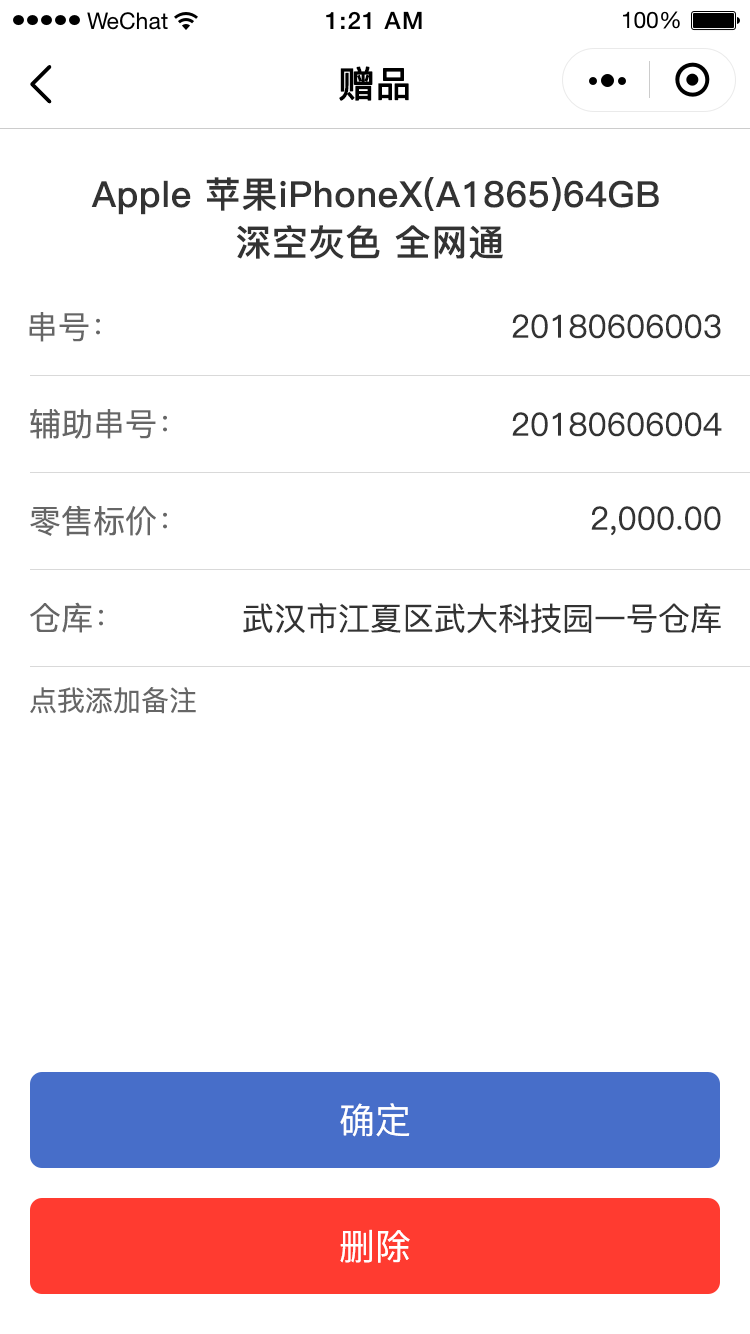
<style>
.page{position:relative;width:750px;height:1334px;background:#ffffff}
.page>*{position:absolute;margin:0}
.t1{font:36px "PingFang-SC-Medium";color:#000000;font-weight:bold}
.t2{font:36px/48px "PingFang-SC-Bold";letter-spacing:0.02em;color:#333333}
.t3{font:32px "PingFang-SC-Medium";color:#666666}
.t4{font:32px "PingFang-SC-Medium";color:#333333}
.t5{font:28px "PingFang-SC-Medium";color:#666666}
.t6{font:36px "PingFang-SC-Medium";color:#ffffff}
</style>
<div class="page">
<p class="t1" style="left:339px;top:66px;width:70px;height:35px">赠品</p>
<p class="t2" style="left:91px;top:177px;width:568px;height:82px;text-align:center">Apple 苹果iPhoneX(A1865)64GB<br>深空灰色 全网通</p>
<p class="t3" style="left:29px;top:312px;width:71px;height:30px">串号：</p>
<p class="t4" style="left:512px;top:314px;width:209px;height:25px">20180606003</p>
<p class="t3" style="left:30px;top:409px;width:137px;height:30px">辅助串号：</p>
<p class="t4" style="left:512px;top:412px;width:210px;height:25px">20180606004</p>
<p class="t3" style="left:30px;top:505px;width:137px;height:31px">零售标价：</p>
<p class="t4" style="left:591px;top:506px;width:130px;height:30px">2,000.00</p>
<p class="t3" style="left:30px;top:602px;width:73px;height:31px">仓库：</p>
<p class="t4" style="left:243px;top:603px;width:478px;height:31px">武汉市江夏区武大科技园一号仓库</p>
<p class="t5" style="left:30px;top:687px;width:166px;height:27px">点我添加备注</p>
<p class="t6" style="left:340px;top:1103px;width:70px;height:34px">确定</p>
<p class="t6" style="left:340px;top:1229px;width:70px;height:34px">删除</p>
</div>
